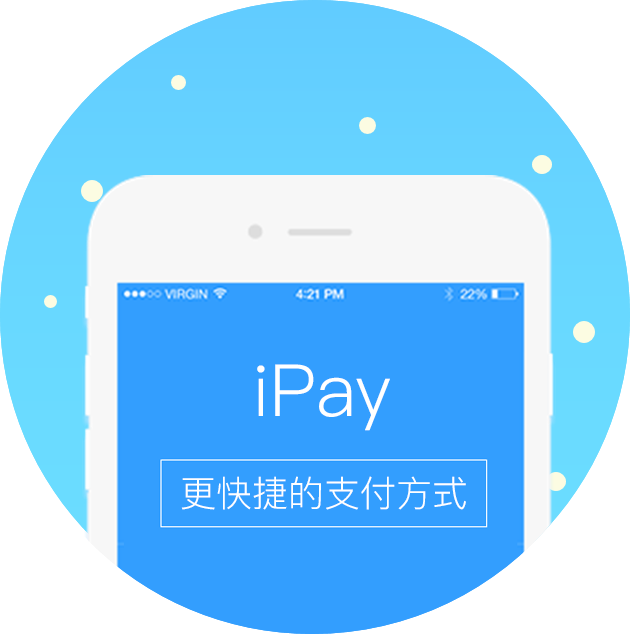
<style>
.page{position:relative;width:630px;height:634px;background:#339efe}
.page>*{position:absolute;margin:0}
.t1{font:72px "PingFang-SC-Regular";color:#ffffff}
.t2{font:36px "PingFang-SC-Regular";color:#ffffff}
</style>
<div class="page">
<p class="t1" style="left:257px;top:364px;width:133px;height:67px">iPay</p>
<p class="t2" style="left:181px;top:476px;width:285px;height:34px">更快捷的支付方式</p>
</div>
